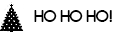
<style>
.page{position:relative;width:128px;height:32px;background:#ffffff}
.page>*{position:absolute;margin:0}
.t1{font:17px "Comfortaa-Bold";color:#000000}
</style>
<div class="page">
<p class="t1" style="left:34px;top:10px;width:78px;height:12px">HO HO HO!</p>
</div>
